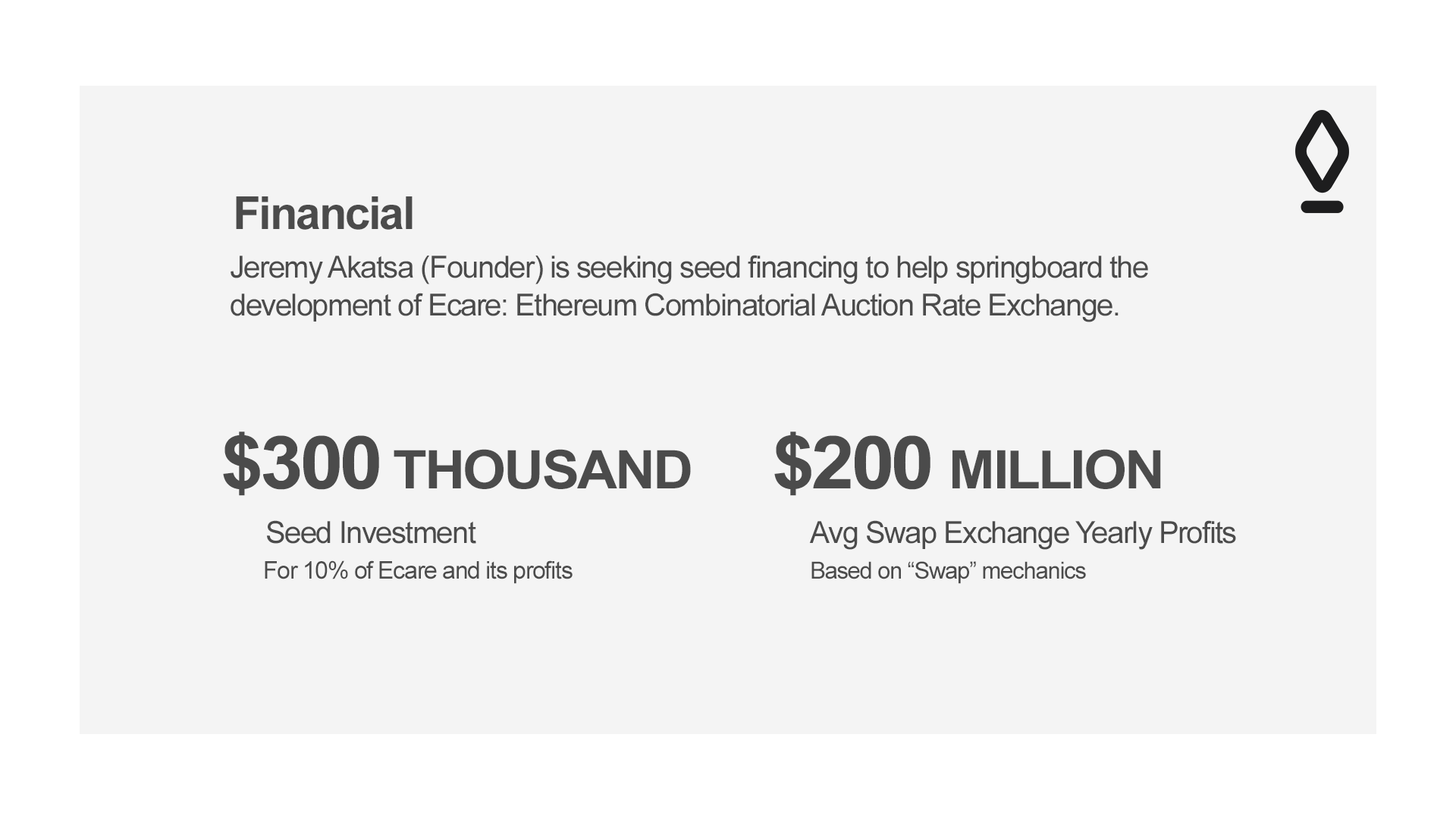
<style>
.page{position:relative;width:1456px;height:819px;background:#f4f4f4}
.page>*{position:absolute;margin:0}
.t1{font:45.5px "Arial-BoldMT";letter-spacing:-0.04em;color:#4b4b4b}
.t2{font:30.3px/37.9px "ArialMT";letter-spacing:-0.04em;color:#4b4b4b}
.t3{font:53.1px "Arial-BoldMT";letter-spacing:-0.04em;color:#4b4b4b;scale:1.05 1}
.t4{font:73.1px "Arial-BoldMT";letter-spacing:-0.04em;color:#4b4b4b;scale:1.05 1}
.t5{font:30.3px "ArialMT";letter-spacing:-0.04em;color:#4b4b4b}
.t6{font:24.3px "ArialMT";letter-spacing:-0.04em;color:#4b4b4b}
.t7{font:23.5px "ArialMT";letter-spacing:-0.04em;color:#4b4b4b}
</style>
<div class="page">
<p class="t1" style="left:236px;top:196px;width:177px;height:34px">Financial</p>
<p class="t2" style="left:231px;top:255px;width:917px;height:67px">Jeremy Akatsa (Founder) is seeking seed financing to help springboard the<br>development of Ecare: Ethereum Combinatorial Auction Rate Exchange.</p>
<p class="t3" style="left:223px;top:431px;width:468px;height:65px"><span class="t4">$300</span> THOUSAND</p>
<p class="t3" style="left:774px;top:431px;width:387px;height:65px"><span class="t4">$200 </span>MILLION</p>
<p class="t5" style="left:267px;top:520px;width:209px;height:24px">Seed Investment</p>
<p class="t5" style="left:809px;top:520px;width:427px;height:30px">Avg Swap Exchange Yearly Profits</p>
<p class="t6" style="left:265px;top:560px;width:308px;height:24px">For 10% of Ecare and its profits</p>
<p class="t7" style="left:811px;top:561px;width:275px;height:23px">Based on “Swap” mechanics</p>
</div>
